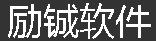
<style>
.page{position:relative;width:156px;height:41px;background:#333333}
.page>*{position:absolute;margin:0}
.t1{font:36px "MicrosoftYaHei";color:#ffffff}
</style>
<div class="page">
<p class="t1" style="left:8px;top:3px;width:143px;height:36px">励铖软件</p>
</div>
